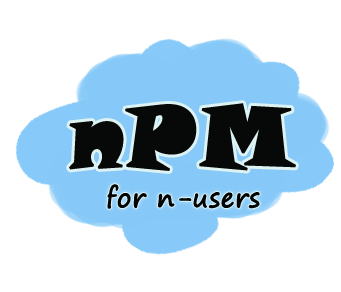
<style>
.page{position:relative;width:341px;height:292px;background:#ffffff}
.page>*{position:absolute;margin:0}
.t1{font:86px "SnapITC-Regular";color:#070808;font-weight:bold}
.t2{font:26px "SegoePrint";color:#070808;font-weight:bold}
</style>
<div class="page">
<p class="t1" style="left:69px;top:103px;width:227px;height:68px">nPM</p>
<p class="t2" style="left:107px;top:184px;width:153px;height:25px">for n-users</p>
</div>
